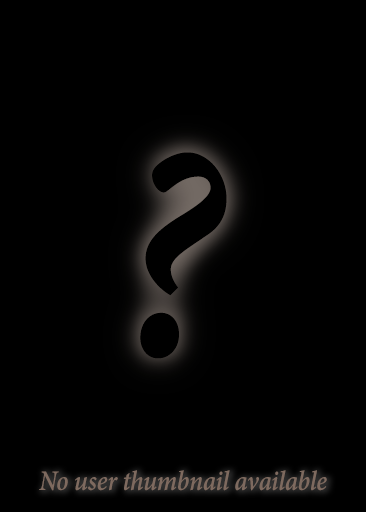
<style>
.page{position:relative;width:366px;height:512px;background:#000000}
.page>*{position:absolute;margin:0}
.t1{font:330px "AdobeDevanagari-BoldItalic";letter-spacing:-0.01em;color:#000000;scale:0.91 1}
.t2{font:30.8px "AdobeDevanagari-BoldItalic";letter-spacing:-0.01em;color:#7e6a5f;scale:0.91 1}
</style>
<div class="page">
<p class="t1" style="left:140px;top:152px;width:87px;height:207px">?</p>
<p class="t2" style="left:39px;top:470px;width:288px;height:21px">No user thumbnail available</p>
</div>
